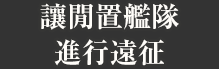
<style>
.page{position:relative;width:219px;height:69px;background:#333333}
.page>*{position:absolute;margin:0}
.t1{font:28px/36px "RyuminPr6N-ExBold";color:#fffdf9}
</style>
<div class="page">
<p class="t1" style="left:40px;top:3px;width:139px;height:63px;text-align:center">讓閒置艦隊<br>進行遠征</p>
</div>
